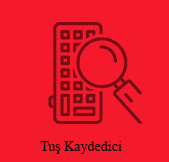
<style>
.page{position:relative;width:169px;height:162px;background:#f4192b}
.page>*{position:absolute;margin:0}
.t1{font:14px "TimesNewRomanPSMT";color:#060606}
</style>
<div class="page">
<p class="t1" style="left:40px;top:141px;width:82px;height:13px">Tuş Kaydedici</p>
</div>
